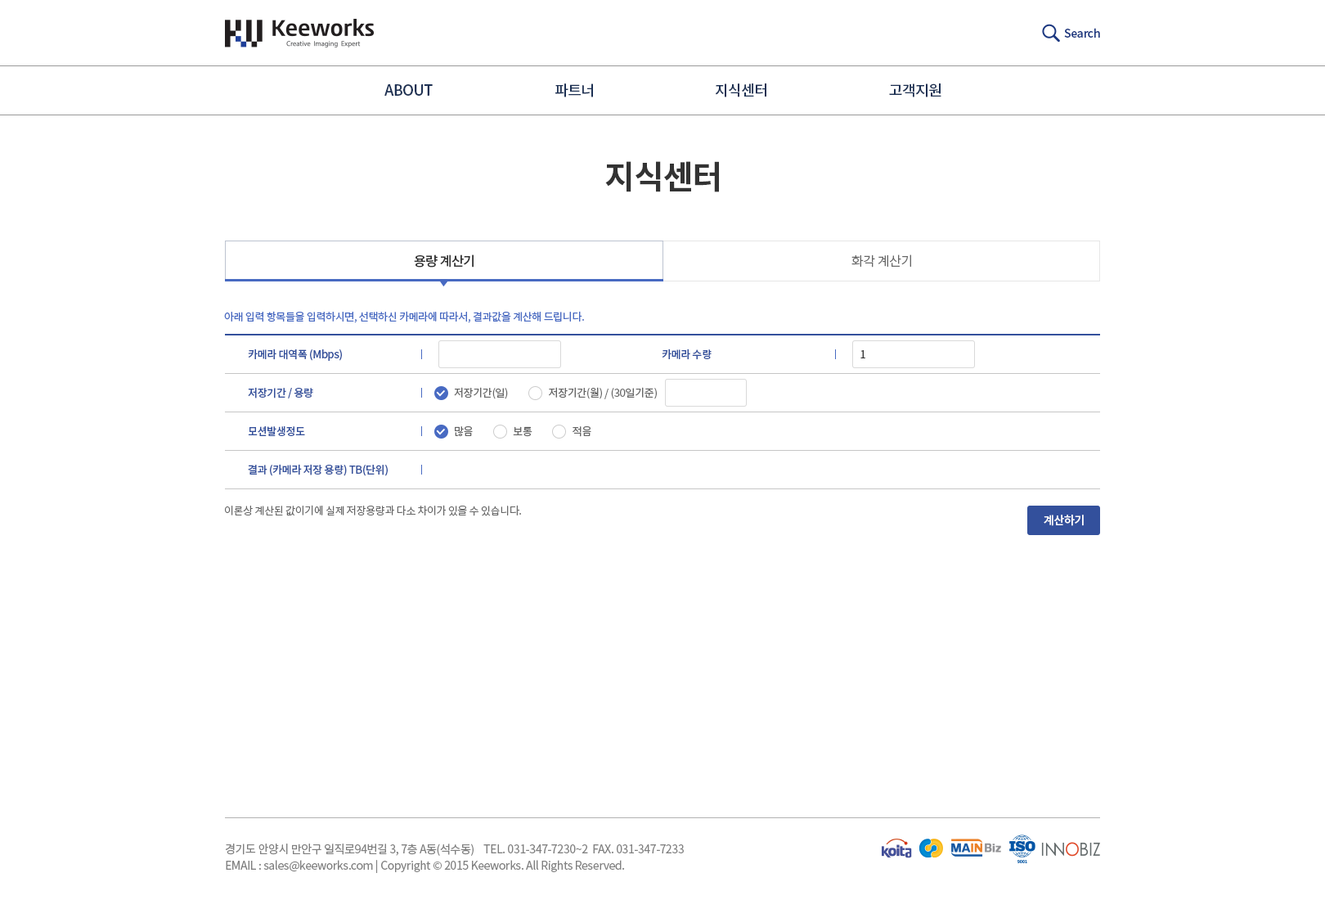
<style>
.page{position:relative;width:1325px;height:900px;background:#ffffff}
.page>*{position:absolute;margin:0}
.t1{font:11.5px "NotoSansCJKkr-Medium";letter-spacing:-0.025em;color:#1b3780}
.t2{font:14.7px "NotoSansCJKkr-Medium";letter-spacing:-0.025em;color:#1c3053;text-transform:uppercase}
.t3{font:32.7px "NotoSansCJKkr-Bold";letter-spacing:-0.025em;color:#333333}
.t4{font:13.1px "NotoSansCJKkr-Medium";letter-spacing:-0.025em;color:#333333}
.t5{font:13.1px "NotoSansCJKkr-DemiLight";letter-spacing:-0.025em;color:#666666}
.t6{font:10.6px "NotoSansCJKkr-Regular";letter-spacing:-0.025em;color:#486ac2}
.t7{font:10.6px/38.4px "NotoSansCJKkr-Medium";letter-spacing:-0.025em;color:#33509c}
.t8{font:10.6px "NotoSansCJKkr-Medium";letter-spacing:-0.025em;color:#33509c}
.t9{font:10.6px "NotoSansCJKkr-Regular";letter-spacing:-0.025em;color:#333333}
.t10{font:10.6px "NotoSansCJKkr-Regular";letter-spacing:-0.025em;color:#666666}
.t11{font:10.6px "NotoSansCJKkr-DemiLight";letter-spacing:-0.025em;color:#666666}
.t12{font:11.5px "NotoSansCJKkr-Medium";letter-spacing:-0.025em;color:#ffffff}
.t13{font:11.5px/16.4px "NotoSansCJKkr-Regular";letter-spacing:-0.025em;color:#808080}
</style>
<div class="page">
<p class="t1" style="left:1064px;top:28px;width:36px;height:10px">Search</p>
<p class="t2" style="left:384px;top:84px;width:49px;height:12px">ABOUT</p>
<p class="t2" style="left:555px;top:83px;width:38px;height:14px">파트너</p>
<p class="t2" style="left:715px;top:83px;width:51px;height:14px">지식센터</p>
<p class="t2" style="left:889px;top:83px;width:53px;height:14px">고객지원</p>
<p class="t3" style="left:605px;top:161px;width:114px;height:31px">지식센터</p>
<p class="t4" style="left:414px;top:254px;width:60px;height:13px">용량 계산기</p>
<p class="t5" style="left:852px;top:254px;width:59px;height:13px">화각 계산기</p>
<p class="t6" style="left:224px;top:311px;width:360px;height:12px">아래 입력 항목들을 입력하시면, 선택하신 카메라에 따라서, 결과값을 계산해 드립니다.</p>
<p class="t7" style="left:248px;top:348px;width:140px;height:128px">카메라 대역폭 (Mbps)<br>저장기간 / 용량<br>모션발생정도<br>결과 (카메라 저장 용량) TB(단위)</p>
<p class="t8" style="left:662px;top:348px;width:50px;height:12px">카메라 수량</p>
<p class="t9" style="left:861px;top:350px;width:4px;height:8px">1</p>
<p class="t10" style="left:454px;top:387px;width:203px;height:12px">저장기간(일)                   저장기간(월) / (30일기준)</p>
<p class="t10" style="left:455px;top:426px;width:136px;height:11px">많음                   보통                   적음</p>
<p class="t11" style="left:225px;top:505px;width:296px;height:11px">이론상 계산된 값이기에 실제 저장용량과 다소 차이가 있을 수 있습니다.</p>
<p class="t12" style="left:1044px;top:515px;width:40px;height:11px">계산하기</p>
<p class="t13" style="left:226px;top:843px;width:458px;height:30px">경기도 안양시 만안구 일직로94번길 3, 7층 A동(석수동)    TEL. 031-347-7230~2  FAX. 031-347-7233<br>EMAIL : sales@keeworks.com | Copyright © 2015 Keeworks. All Rights Reserved.</p>
</div>
